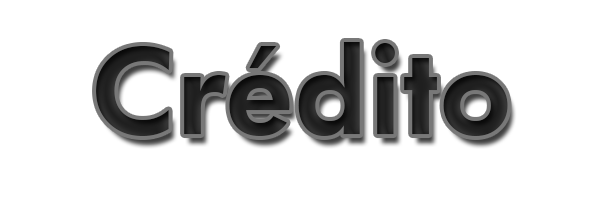
<style>
.page{position:relative;width:600px;height:200px;background:#ffffff}
.page>*{position:absolute;margin:0}
.t1{font:120px "FuturaBT-Heavy";color:#212121}
</style>
<div class="page">
<p class="t1" style="left:96px;top:42px;width:412px;height:94px">Crédito</p>
</div>
